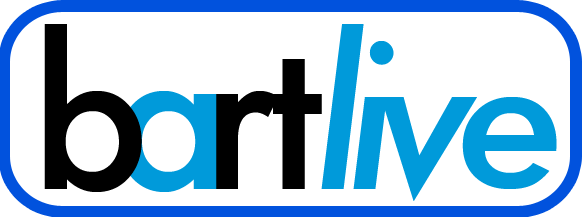
<style>
.page{position:relative;width:582px;height:217px;background:#ffffff}
.page>*{position:absolute;margin:0}
.t1{font:200px "Futura-Medium";letter-spacing:0.04em;color:#000000}
.t2{font:200px "Futura-MediumItalic";letter-spacing:-0.1em;color:#009ada}
.t3{font:200px "Futura-Medium";letter-spacing:0.04em;color:#009ada}
</style>
<div class="page">
<p class="t1" style="left:44px;top:24px;width:98px;height:168px">b</p>
<p class="t2" style="left:321px;top:24px;width:236px;height:177px">live</p>
<p class="t1" style="left:273px;top:59px;width:49px;height:130px">t</p>
<p class="t3" style="left:119px;top:91px;width:98px;height:101px">a</p>
<p class="t1" style="left:215px;top:91px;width:64px;height:98px">r</p>
</div>
